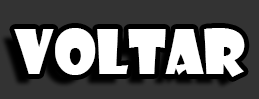
<style>
.page{position:relative;width:259px;height:99px;background:#333333}
.page>*{position:absolute;margin:0}
.t1{font:60.1px "ShowcardGothic-Reg";color:#ffffff}
</style>
<div class="page">
<p class="t1" style="left:14px;top:28px;width:231px;height:49px">Voltar</p>
</div>
